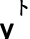
<style>
.page{position:relative;width:30px;height:39px;background:#ffffff}
.page>*{position:absolute;margin:0}
.t1{font:18px "DFKaiShu-SB-Estd-BF";color:#000000;font-weight:bold}
</style>
<div class="page">
<p class="t1" style="left:20px;top:0px;width:8px;height:16px">卜</p>
</div>
